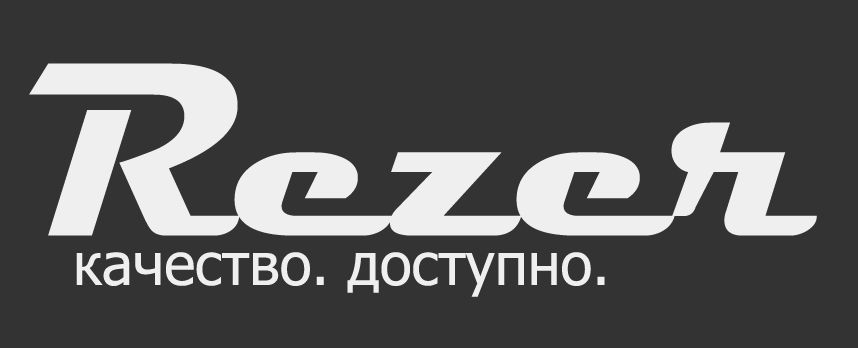
<style>
.page{position:relative;width:858px;height:348px;background:#333333}
.page>*{position:absolute;margin:0}
.t1{font:250px "Magneto-Bold";color:#efefef}
.t2{font:58.3px "Tahoma";color:#efefef}
</style>
<div class="page">
<p class="t1" style="left:29px;top:63px;width:788px;height:173px">Rezer</p>
<p class="t2" style="left:76px;top:252px;width:529px;height:45px">качество. доступно.</p>
</div>
